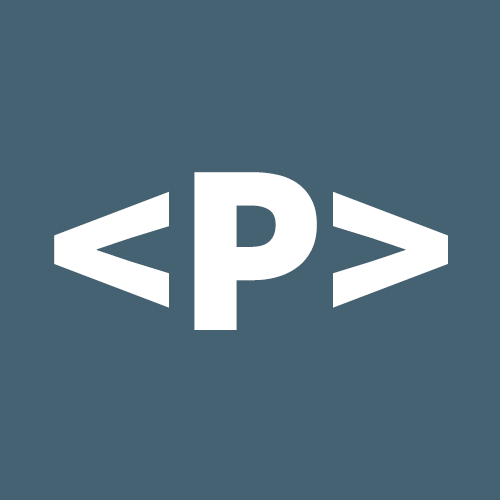
<style>
.page{position:relative;width:500px;height:500px;background:#456273}
.page>*{position:absolute;margin:0}
.t1{font:242.4px "SourceSansPro-Black";color:#ffffff}
</style>
<div class="page">
<p class="t1" style="left:54px;top:172px;width:394px;height:158px">&lt;P&gt;</p>
</div>
